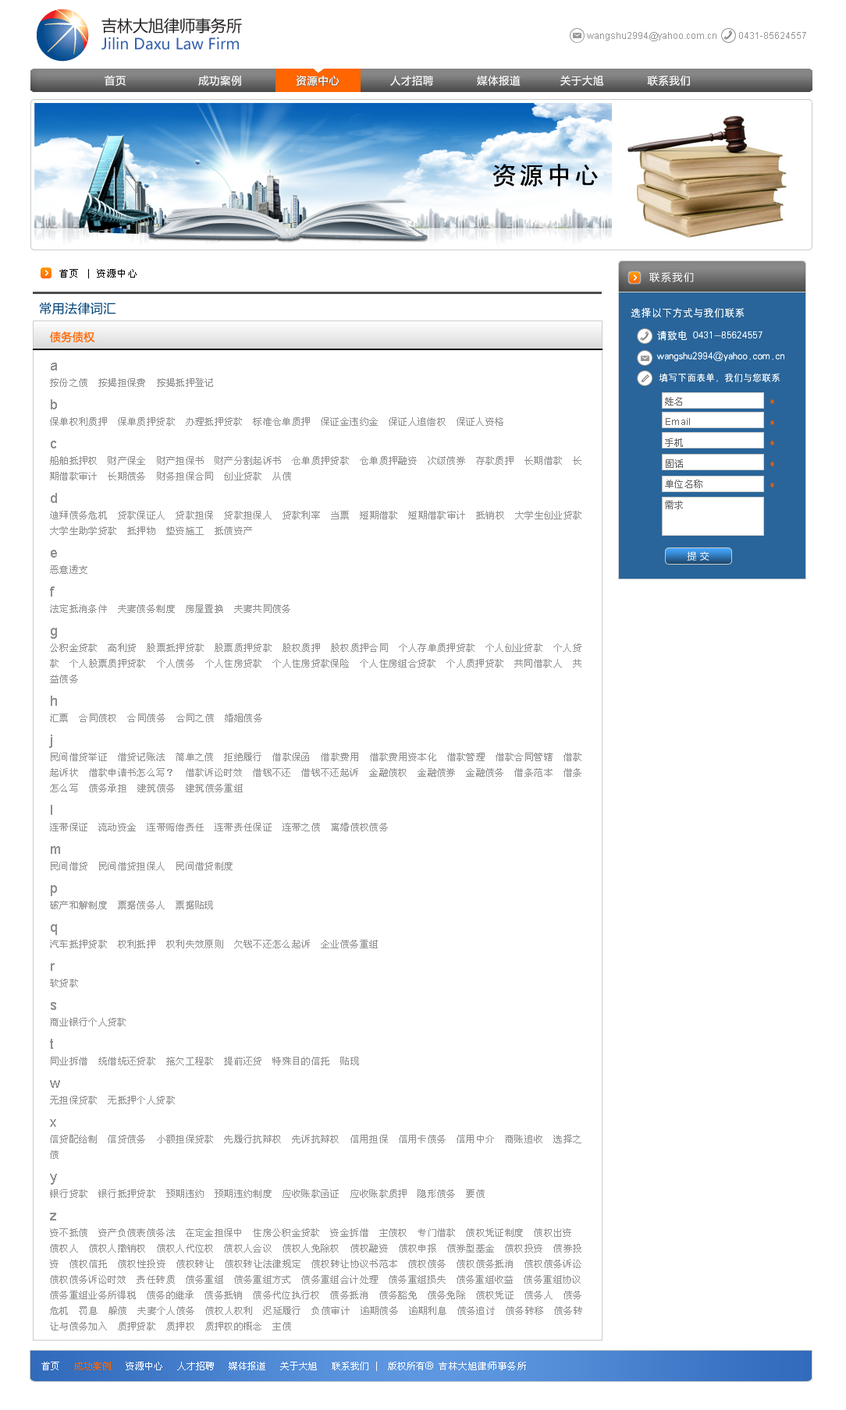
<style>
.page{position:relative;width:846px;height:1410px;background:#ffffff}
.page>*{position:absolute;margin:0}
.t1{font:15.2px "MicrosoftYaHei";color:#3562ae}
.t2{font:15.6px "MicrosoftYaHei";color:#231f20}
.t3{font:9.4px "ArialMT";color:#989898}
.t4{font:10.4px "MicrosoftYaHei";letter-spacing:0.05em;color:#fffefe}
.t5{font:25px "SimHei";letter-spacing:0.1em;color:#000000}
.t6{font:9.4px "SimSun";letter-spacing:0.1em;color:#000000}
.t7{font:10.4px "MicrosoftYaHei";letter-spacing:0.1em;color:#ffffff}
.t8{font:12.5px "MicrosoftYaHei";letter-spacing:0.029em;color:#004378}
.t9{font:10.4px/22.9px "HYg2gj";color:#ffffff}
.t10{font:10.4px/20.8px "HYg2gj";color:#ffffff}
.t11{font:9.4px/20.8px "HYg2gj";color:#ffffff}
.t12{font:10.9px "MicrosoftYaHei";letter-spacing:0.029em;color:#ff6600}
.t13{font:9.4px/15.6px "SimSun";letter-spacing:0.029em;color:#909090}
.t14{font:14px/23.4px "ArialMT";letter-spacing:0.029em;color:#909090}
.t15{font:9.4px/20.8px "SimSun";letter-spacing:0.029em;color:#666666}
.t16{font:9.4px/20.8px "ArialMT";letter-spacing:0.029em;color:#666666}
.t17{font:9.4px/20.8px "SimSun";letter-spacing:0.029em;color:#ff6500}
.t18{font:9.4px "MicrosoftYaHei";letter-spacing:0.029em;color:#ffffff}
.t19{font:9.4px "SimSun";color:#ffffff}
.t20{font:9.4px "SimSun";color:#ff6500}
.t21{font:10.4px "ArialMT";color:#ffffff}
.t22{font:9.4px "SimSun";letter-spacing:0.05em;color:#ffffff}
</style>
<div class="page">
<p class="t1" style="left:101px;top:18px;width:141px;height:32px"><span class="t2">吉林大旭律师事务所<br></span>Jilin Daxu Law Firm</p>
<p class="t3" style="left:587px;top:32px;width:219px;height:9px">wangshu2994@yahoo.com.cn         0431-85624557</p>
<p class="t4" style="left:105px;top:75px;width:585px;height:11px">首页                    成功案例               资源中心              人才招聘            媒体报道           关于大旭            联系我们</p>
<p class="t4" style="left:105px;top:75px;width:585px;height:11px">首页                    成功案例               资源中心              人才招聘            媒体报道           关于大旭            联系我们</p>
<p class="t5" style="left:492px;top:164px;width:105px;height:23px">资源中心</p>
<p class="t6" style="left:59px;top:269px;width:78px;height:9px">首页 | 资源中心</p>
<p class="t7" style="left:649px;top:272px;width:44px;height:10px">联系我们</p>
<p class="t7" style="left:649px;top:272px;width:44px;height:10px">联系我们</p>
<p class="t8" style="left:40px;top:302px;width:75px;height:13px">常用法律词汇</p>
<p class="t9" style="left:630px;top:308px;width:154px;height:74px">选择以下方式与我们联系<br>     请致电 0431-85624557<br><span class="t10">     wangshu2994@yahoo.com.cn<br></span><span class="t11">      填写下面表单，我们与您联系</span></p>
<p class="t9" style="left:630px;top:308px;width:154px;height:74px">选择以下方式与我们联系<br>     请致电 0431-85624557<br><span class="t10">     wangshu2994@yahoo.com.cn<br></span><span class="t11">      填写下面表单，我们与您联系</span></p>
<p class="t12" style="left:50px;top:332px;width:45px;height:10px">债务债权</p>
<p class="t13" style="left:49px;top:363px;width:533px;height:968px"><span class="t14">a<br></span>按份之债  按揭担保费  按揭抵押登记<br><span class="t14">b<br></span>保单权利质押  保单质押贷款  办理抵押贷款  标准仓单质押  保证金违约金  保证人追偿权  保证人资格<br><span class="t14">c<br></span>船舶抵押权  财产保全  财产担保书  财产分割起诉书  仓单质押贷款  仓单质押融资  次级债券  存款质押  长期借款  长期借款审计  长期债务  财务担保合同  创业贷款  从债<br><span class="t14">d<br></span>迪拜债务危机  贷款保证人  贷款担保  贷款担保人  贷款利率  当票  短期借款  短期借款审计  抵销权  大学生创业贷款  大学生助学贷款  抵押物  垫资施工  抵债资产<br><span class="t14">e<br></span>恶意透支<br><span class="t14">f<br></span>法定抵消条件  夫妻债务制度  房屋置换  夫妻共同债务<br><span class="t14">g<br></span>公积金贷款  高利贷  股票抵押贷款  股票质押贷款  股权质押  股权质押合同  个人存单质押贷款  个人创业贷款  个人贷款  个人股票质押贷款  个人债务  个人住房贷款  个人住房贷款保险  个人住房组合贷款  个人质押贷款  共同借款人  共益债务<br><span class="t14">h<br></span>汇票  合同债权  合同债务  合同之债  婚姻债务<br><span class="t14">j<br></span>民间借贷举证  借贷记账法  简单之债  拒绝履行  借款保函  借款费用  借款费用资本化  借款管理  借款合同管辖  借款起诉状  借款申请书怎么写？  借款诉讼时效  借钱不还  借钱不还起诉  金融债权  金融债券  金融债务  借条范本  借条怎么写  债务承担  建筑债务  建筑债务重组<span class="t14"><br>l<br></span>连带保证  流动资金  连带赔偿责任  连带责任保证  连带之债  离婚债权债务<br><span class="t14">m<br></span>民间借贷  民间借贷担保人  民间借贷制度<br><span class="t14">p<br></span>破产和解制度  票据债务人  票据贴现<br><span class="t14">q<br></span>汽车抵押贷款  权利抵押  权利失效原则  欠钱不还怎么起诉  企业债务重组<br><span class="t14">r<br></span>软贷款<br><span class="t14">s<br></span>商业银行个人贷款<br><span class="t14">t<br></span>同业拆借  统借统还贷款  拖欠工程款  提前还贷  特殊目的信托  贴现<br><span class="t14">w<br></span>无担保贷款  无抵押个人贷款<br><span class="t14">x<br></span>信贷配给制  信贷债务  小额担保贷款  先履行抗辩权  先诉抗辩权  信用担保  信用卡债务  信用中介  商账追收  选择之债<br><span class="t14">y<br></span>银行贷款  银行抵押贷款  预期违约  预期违约制度  应收账款函证  应收账款质押  隐形债务  要债<br><span class="t14">z<br></span>资不抵债  资产负债表债务法  在定金担保中  住房公积金贷款  资金拆借  主债权  专门借款  债权凭证制度  债权出资  债权人  债权人撤销权  债权人代位权  债权人会议  债权人免除权  债权融资  债权申报  债券型基金  债权投资  债券投资  债权信托  债权性投资  债权转让  债权转让法律规定  债权转让协议书范本  债权债务  债权债务抵消  债权债务诉讼  债权债务诉讼时效  责任转质  债务重组  债务重组方式  债务重组会计处理  债务重组损失  债务重组收益  债务重组协议  债务重组业务所得税  债务的继承  债务抵销  债务代位执行权  债务抵消  债务豁免  债务免除  债权凭证  债务人  债务危机  罚息  躲债  夫妻个人债务  债权人权利  迟延履行  负债审计  逾期债务  逾期利息  债务追讨  债务转移  债务转让与债务加入  质押贷款  质押权  质押权的概念  主债</p>
<p class="t15" style="left:665px;top:397px;width:37px;height:112px">姓名<br><span class="t16">Email<br></span>手机<br>固话<br>单位名称<br>需求</p>
<p class="t17" style="left:770px;top:399px;width:4px;height:89px">*<br>*<br>*<br>*<br>*</p>
<p class="t18" style="left:686px;top:551px;width:23px;height:10px">提 交</p>
<p class="t19" style="left:41px;top:1362px;width:485px;height:9px">首页   <span class="t20">成功案例 </span>  资源中心   人才招聘   媒体报道   关于大旭   联系我们 |  版权所有<span class="t21">® </span><span class="t22">吉林大旭律师事务所</span></p>
</div>
